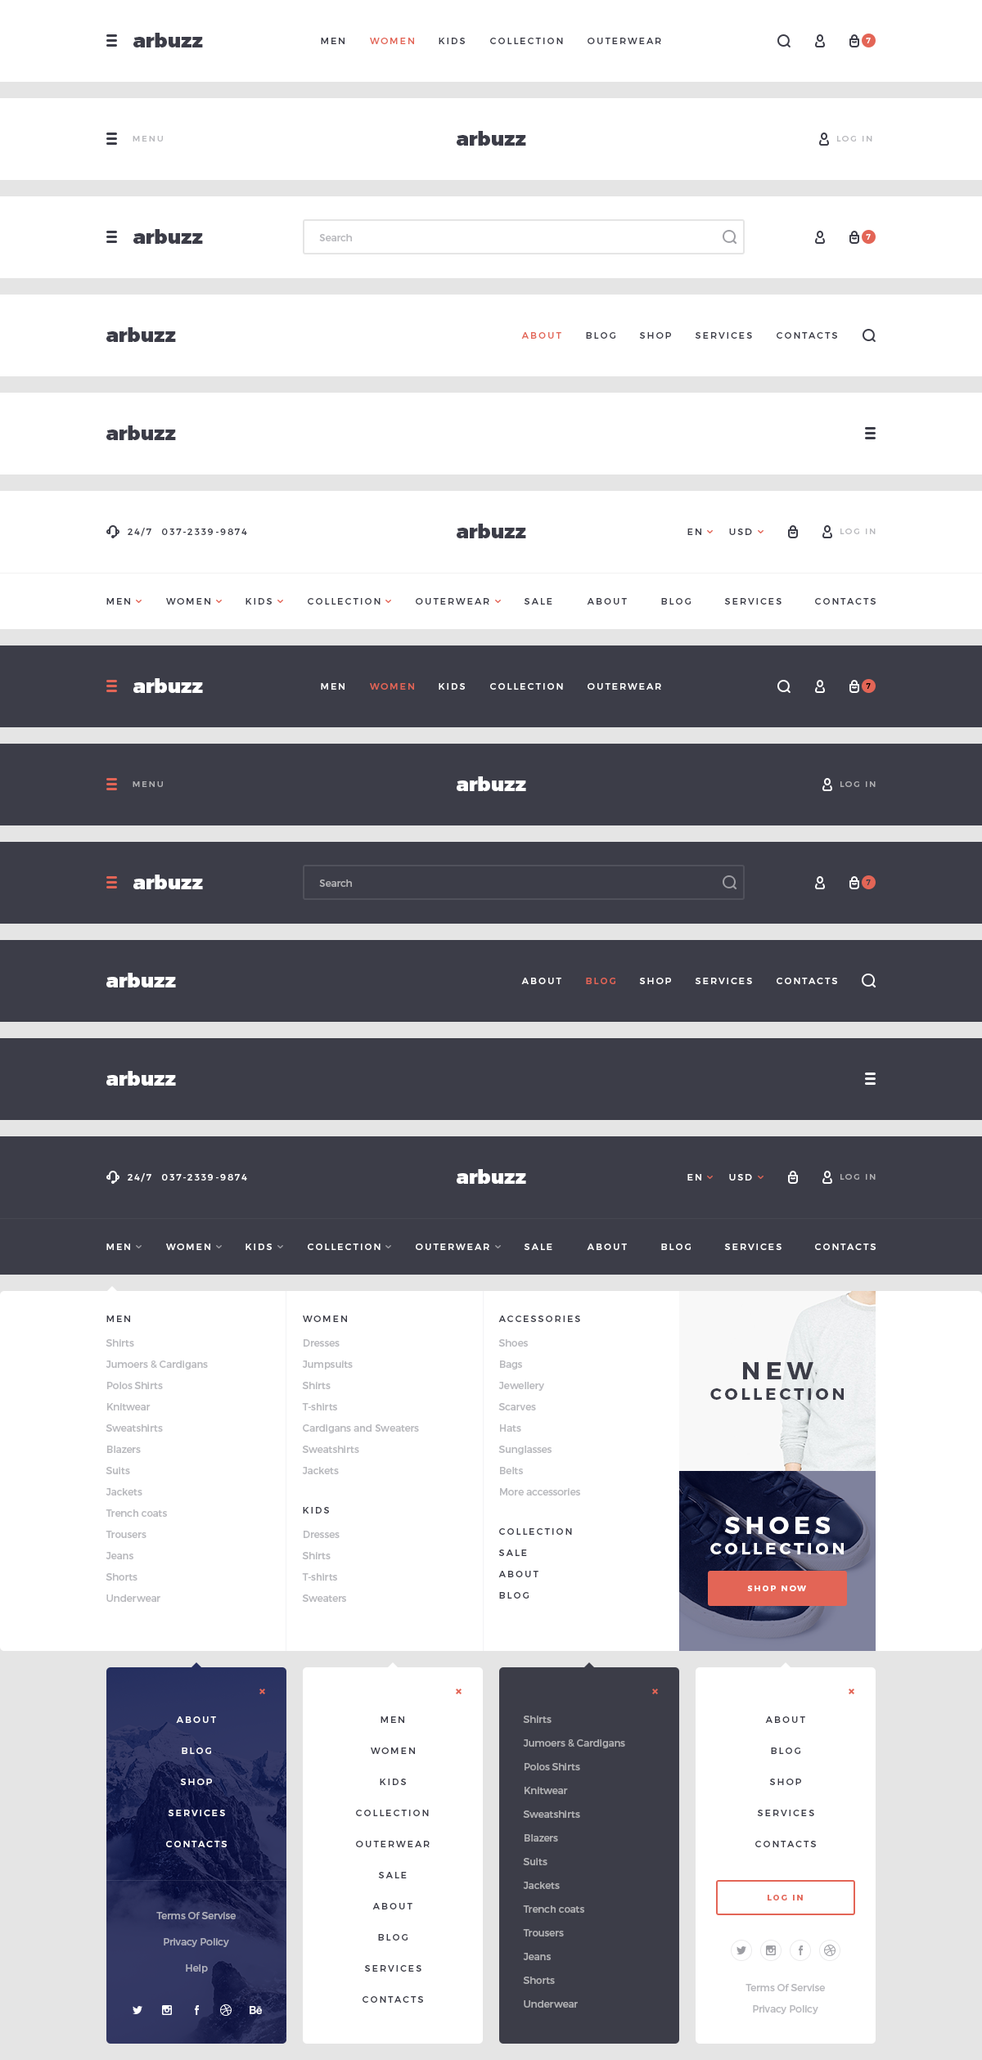
<style>
.page{position:relative;width:982px;height:2060px;background:#ffffff}
.page>*{position:absolute;margin:0}
.t1{font:19.6px "Montserrat-Black";color:#3c3d48}
.t2{font:9px "Montserrat-Regular";letter-spacing:0.2em;color:#3c3d48;text-transform:uppercase}
.t3{font:9px "Montserrat-Regular";letter-spacing:0.2em;color:#e36556;text-transform:uppercase}
.t4{font:7.4px "Montserrat-Regular";letter-spacing:0.2em;color:#ffffff;text-transform:uppercase}
.t5{font:8.2px "Montserrat-Regular";letter-spacing:0.2em;color:#b8b9bd;text-transform:uppercase}
.t6{font:9.8px "Montserrat-Regular";color:#b8b9bd}
.t7{font:19.6px "Montserrat-Black";color:#ffffff}
.t8{font:9px "Montserrat-Regular";letter-spacing:0.2em;color:#ffffff;text-transform:uppercase}
.t9{font:7.4px "Montserrat-Regular";letter-spacing:0.2em;color:#000000;text-transform:uppercase}
.t10{font:8.2px "Montserrat-Regular";letter-spacing:0.2em;color:#b0b0b3;text-transform:uppercase}
.t11{font:9.8px "Montserrat-Regular";color:#b0b0b3}
.t12{font:7.4px "Montserrat-Regular";letter-spacing:0.2em;color:#3c3d48;text-transform:uppercase}
.t13{font:9.8px/21.3px "Montserrat-Regular";color:#b8b9bd}
.t14{font:16.4px/20.5px "Montserrat-Bold";letter-spacing:0.2em;color:#3c3d48;text-transform:uppercase}
.t15{font:24.5px/20.5px "Montserrat-Bold";letter-spacing:0.2em;color:#3c3d48;text-transform:uppercase}
.t16{font:16.4px/20.5px "Montserrat-Bold";letter-spacing:0.2em;color:#ffffff;text-transform:uppercase}
.t17{font:24.5px/20.5px "Montserrat-Bold";letter-spacing:0.2em;color:#ffffff;text-transform:uppercase}
.t18{font:9px/21.3px "Montserrat-Regular";letter-spacing:0.2em;color:#3c3d48;text-transform:uppercase}
.t19{font:8.2px "Montserrat-Bold";letter-spacing:0.2em;color:#ffffff;text-transform:uppercase}
.t20{font:9.8px/23.7px "Montserrat-Regular";color:#b0b0b3}
.t21{font:8.2px "Montserrat-Bold";letter-spacing:0.2em;color:#e36556;text-transform:uppercase}
.t22{font:9.8px "Montserrat-Regular";color:#abadb9}
.t23{font:9.8px "Montserrat-Regular";color:#adaebc}
</style>
<div class="page">
<p class="t1" style="left:133px;top:33px;width:70px;height:14px">arbuzz</p>
<p class="t2" style="left:321px;top:38px;width:23px;height:6px">men</p>
<p class="t3" style="left:370px;top:38px;width:44px;height:6px">women</p>
<p class="t2" style="left:439px;top:38px;width:26px;height:6px">kids</p>
<p class="t2" style="left:490px;top:38px;width:73px;height:6px">collection</p>
<p class="t2" style="left:587px;top:38px;width:74px;height:6px">outerwear</p>
<p class="t4" style="left:866px;top:38px;width:5px;height:5px">7</p>
<p class="t5" style="left:133px;top:136px;width:30px;height:6px">Menu</p>
<p class="t1" style="left:457px;top:131px;width:69px;height:15px">arbuzz</p>
<p class="t5" style="left:837px;top:136px;width:35px;height:6px">Log in</p>
<p class="t1" style="left:133px;top:229px;width:70px;height:15px">arbuzz</p>
<p class="t6" style="left:319px;top:234px;width:33px;height:7px">Search</p>
<p class="t4" style="left:866px;top:234px;width:5px;height:6px">7</p>
<p class="t1" style="left:106px;top:327px;width:70px;height:15px">arbuzz</p>
<p class="t3" style="left:521px;top:332px;width:40px;height:7px">about</p>
<p class="t2" style="left:586px;top:332px;width:29px;height:7px">blog</p>
<p class="t2" style="left:639px;top:332px;width:32px;height:7px">shop</p>
<p class="t2" style="left:695px;top:332px;width:57px;height:7px">services</p>
<p class="t2" style="left:776px;top:332px;width:61px;height:7px">Contacts</p>
<p class="t1" style="left:106px;top:425px;width:70px;height:15px">arbuzz</p>
<p class="t2" style="left:128px;top:528px;width:119px;height:9px">24/7  037-2339-9874</p>
<p class="t1" style="left:457px;top:524px;width:69px;height:14px">arbuzz</p>
<p class="t2" style="left:687px;top:529px;width:14px;height:6px">EN</p>
<p class="t2" style="left:729px;top:529px;width:23px;height:6px">USD</p>
<p class="t5" style="left:840px;top:529px;width:35px;height:5px">Log in</p>
<p class="t2" style="left:106px;top:598px;width:24px;height:7px">men</p>
<p class="t2" style="left:166px;top:598px;width:44px;height:7px">women</p>
<p class="t2" style="left:245px;top:598px;width:27px;height:7px">kids</p>
<p class="t2" style="left:308px;top:598px;width:72px;height:7px">collection</p>
<p class="t2" style="left:416px;top:598px;width:73px;height:7px">outerwear</p>
<p class="t2" style="left:524px;top:598px;width:28px;height:7px">Sale</p>
<p class="t2" style="left:587px;top:598px;width:40px;height:7px">about</p>
<p class="t2" style="left:661px;top:598px;width:30px;height:7px">blog</p>
<p class="t2" style="left:724px;top:598px;width:57px;height:7px">services</p>
<p class="t2" style="left:815px;top:598px;width:60px;height:7px">Contacts</p>
<p class="t7" style="left:133px;top:678px;width:70px;height:15px">arbuzz</p>
<p class="t8" style="left:321px;top:683px;width:23px;height:7px">men</p>
<p class="t3" style="left:370px;top:683px;width:44px;height:7px">women</p>
<p class="t8" style="left:439px;top:683px;width:26px;height:7px">kids</p>
<p class="t8" style="left:490px;top:683px;width:73px;height:7px">collection</p>
<p class="t8" style="left:587px;top:683px;width:74px;height:7px">outerwear</p>
<p class="t9" style="left:866px;top:683px;width:5px;height:6px">7</p>
<p class="t10" style="left:133px;top:781px;width:30px;height:6px">Menu</p>
<p class="t7" style="left:457px;top:776px;width:69px;height:15px">arbuzz</p>
<p class="t10" style="left:840px;top:781px;width:35px;height:6px">Log in</p>
<p class="t7" style="left:133px;top:875px;width:70px;height:14px">arbuzz</p>
<p class="t11" style="left:319px;top:880px;width:33px;height:7px">Search</p>
<p class="t12" style="left:866px;top:880px;width:5px;height:5px">7</p>
<p class="t7" style="left:106px;top:973px;width:70px;height:15px">arbuzz</p>
<p class="t8" style="left:521px;top:978px;width:40px;height:6px">about</p>
<p class="t3" style="left:586px;top:978px;width:29px;height:6px">blog</p>
<p class="t8" style="left:639px;top:978px;width:32px;height:6px">shop</p>
<p class="t8" style="left:695px;top:978px;width:57px;height:6px">services</p>
<p class="t8" style="left:776px;top:978px;width:61px;height:6px">Contacts</p>
<p class="t7" style="left:106px;top:1071px;width:70px;height:15px">arbuzz</p>
<p class="t7" style="left:457px;top:1169px;width:69px;height:15px">arbuzz</p>
<p class="t8" style="left:128px;top:1173px;width:119px;height:9px">24/7  037-2339-9874</p>
<p class="t8" style="left:687px;top:1174px;width:14px;height:7px">EN</p>
<p class="t8" style="left:729px;top:1174px;width:23px;height:7px">USD</p>
<p class="t10" style="left:840px;top:1174px;width:35px;height:6px">Log in</p>
<p class="t8" style="left:106px;top:1244px;width:24px;height:6px">men</p>
<p class="t8" style="left:166px;top:1244px;width:44px;height:6px">women</p>
<p class="t8" style="left:245px;top:1244px;width:27px;height:6px">kids</p>
<p class="t8" style="left:308px;top:1244px;width:72px;height:6px">collection</p>
<p class="t8" style="left:416px;top:1244px;width:73px;height:6px">outerwear</p>
<p class="t8" style="left:524px;top:1244px;width:28px;height:6px">Sale</p>
<p class="t8" style="left:587px;top:1244px;width:40px;height:6px">about</p>
<p class="t8" style="left:661px;top:1244px;width:30px;height:6px">blog</p>
<p class="t8" style="left:724px;top:1244px;width:57px;height:6px">services</p>
<p class="t8" style="left:815px;top:1244px;width:60px;height:6px">Contacts</p>
<p class="t2" style="left:106px;top:1316px;width:24px;height:6px">men</p>
<p class="t2" style="left:303px;top:1316px;width:44px;height:6px">women</p>
<p class="t2" style="left:498px;top:1316px;width:82px;height:6px">Accessories</p>
<p class="t13" style="left:106px;top:1339px;width:102px;height:263px">Shirts<br>Jumoers &amp; Cardigans<br>Polos Shirts<br>Knitwear<br>Sweatshirts<br>Blazers<br>Suits<br>Jackets<br>Trench coats<br>Trousers<br>Jeans<br>Shorts<br>Underwear</p>
<p class="t13" style="left:302px;top:1339px;width:117px;height:135px">Dresses<br>Jumpsuits<br>Shirts<br>T-shirts<br>Cardigans and Sweaters<br>Sweatshirts<br>Jackets</p>
<p class="t13" style="left:498px;top:1339px;width:82px;height:157px">Shoes<br>Bags<br>Jewellery<br>Scarves<br>Hats<br>Sunglasses<br>Belts<br>More accessories</p>
<p class="t14" style="left:710px;top:1362px;width:134px;height:38px;text-align:center"><span class="t15">new<br></span>collection</p>
<p class="t2" style="left:303px;top:1507px;width:26px;height:7px">kids</p>
<p class="t16" style="left:710px;top:1517px;width:134px;height:38px;text-align:center"><span class="t17">shoes<br></span>collection</p>
<p class="t18" style="left:498px;top:1528px;width:74px;height:71px">Collection<br>Sale<br>About<br>Blog</p>
<p class="t13" style="left:302px;top:1531px;width:44px;height:71px">Dresses<br>Shirts<br>T-shirts<br>Sweaters</p>
<p class="t19" style="left:747px;top:1586px;width:59px;height:5px">shop now</p>
<p class="t8" style="left:176px;top:1717px;width:40px;height:6px">about</p>
<p class="t2" style="left:380px;top:1717px;width:24px;height:6px">men</p>
<p class="t20" style="left:523px;top:1716px;width:102px;height:292px">Shirts<br>Jumoers &amp; Cardigans<br>Polos Shirts<br>Knitwear<br>Sweatshirts<br>Blazers<br>Suits<br>Jackets<br>Trench coats<br>Trousers<br>Jeans<br>Shorts<br>Underwear</p>
<p class="t2" style="left:765px;top:1717px;width:40px;height:6px">about</p>
<p class="t8" style="left:182px;top:1748px;width:29px;height:6px">blog</p>
<p class="t2" style="left:371px;top:1748px;width:44px;height:6px">women</p>
<p class="t2" style="left:771px;top:1748px;width:29px;height:6px">blog</p>
<p class="t8" style="left:180px;top:1779px;width:32px;height:6px">shop</p>
<p class="t2" style="left:380px;top:1779px;width:26px;height:6px">kids</p>
<p class="t2" style="left:769px;top:1779px;width:32px;height:6px">shop</p>
<p class="t8" style="left:168px;top:1810px;width:57px;height:6px">services</p>
<p class="t2" style="left:356px;top:1810px;width:73px;height:6px">collection</p>
<p class="t2" style="left:757px;top:1810px;width:57px;height:6px">services</p>
<p class="t8" style="left:166px;top:1841px;width:61px;height:6px">Contacts</p>
<p class="t2" style="left:356px;top:1841px;width:74px;height:6px">outerwear</p>
<p class="t2" style="left:755px;top:1841px;width:61px;height:6px">Contacts</p>
<p class="t2" style="left:378px;top:1872px;width:29px;height:7px">Sale</p>
<p class="t21" style="left:767px;top:1895px;width:36px;height:6px">Log IN</p>
<p class="t22" style="left:156px;top:1912px;width:80px;height:7px">Terms Of Servise</p>
<p class="t2" style="left:372px;top:1903px;width:40px;height:7px">about</p>
<p class="t2" style="left:378px;top:1934px;width:29px;height:7px">blog</p>
<p class="t23" style="left:164px;top:1938px;width:65px;height:9px">Privacy Policy</p>
<p class="t23" style="left:186px;top:1964px;width:22px;height:9px">Help</p>
<p class="t2" style="left:364px;top:1965px;width:57px;height:7px">services</p>
<p class="t6" style="left:745px;top:1984px;width:80px;height:7px">Terms Of Servise</p>
<p class="t2" style="left:362px;top:1996px;width:61px;height:7px">Contacts</p>
<p class="t6" style="left:753px;top:2005px;width:65px;height:9px">Privacy Policy</p>
</div>
